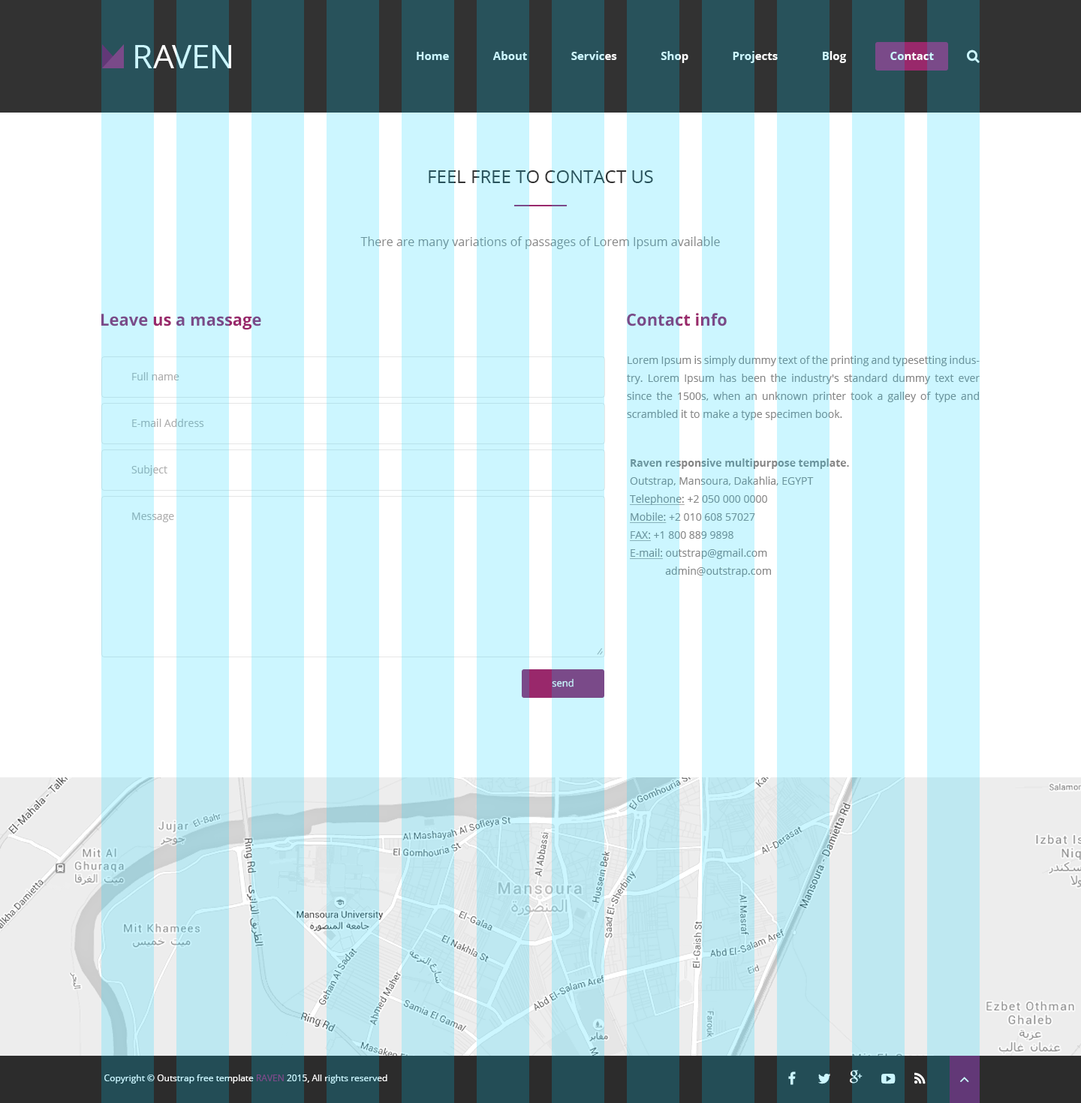
<style>
.page{position:relative;width:1081px;height:1103px;background:#ccf6ff}
.page>*{position:absolute;margin:0}
.t1{font:33px "OpenSans";color:#ccf6ff}
.t2{font:11.3px "OpenSans-Bold"}
.t3{font:18px "OpenSans";color:#28525b;text-transform:uppercase}
.t4{font:12px "OpenSans"}
.t5{font:16.5px "OpenSans-Bold"}
.t6{font:16.5px "OpenSans-Bold";color:#7a4a89}
.t7{font:10.5px/18px "OpenSans";color:#6b959e}
.t8{font:10.5px "OpenSans";color:#aeaeae}
.t9{font:10.5px "OpenSans"}
.t10{font:10.5px/18px "OpenSans-Bold";color:#6b959e}
.t11{font:10.5px/18px "OpenSans";color:#6b959e;text-decoration:underline}
.t12{font:9.8px "OpenSans";color:#ccf6ff}
.t13{font:9px "OpenSans"}
</style>
<div class="page">
<p class="t1" style="left:135px;top:45px;width:96px;height:23px">RAVEN</p>
<p class="t2" style="left:417px;top:51px;width:517px;height:12px">Home               About               Services               Shop               Projects               Blog               Contact</p>
<p class="t3" style="left:429px;top:170px;width:224px;height:13px">feel free to Contact us</p>
<p class="t4" style="left:360px;top:236px;width:360px;height:13px">There are many variations of passages of Lorem Ipsum available</p>
<p class="t5" style="left:101px;top:314px;width:160px;height:16px">Leave us a massage</p>
<p class="t6" style="left:627px;top:313px;width:100px;height:13px">Contact info</p>
<p class="t7" style="left:627px;top:356px;width:352px;height:64px;text-align:justify">Lorem Ipsum is simply dummy text of the printing and typesetting industry. Lorem Ipsum has been the industry's standard dummy text ever since the 1500s, when an unknown printer took a galley of type and scrambled it to make a type specimen book.</p>
<p class="t8" style="left:132px;top:372px;width:47px;height:9px">Full name</p>
<p class="t9" style="left:132px;top:419px;width:72px;height:8px">E-mail Address</p>
<p class="t7" style="left:630px;top:459px;width:219px;height:118px;text-align:justify"><span class="t10">Raven responsive multipurpose template.<br></span>Outstrap, Mansoura, Dakahlia, EGYPT<br><span class="t11">Telephone:</span> +2 050 000 0000<br><span class="t11">Mobile:</span> +2 010 608 57027<br><span class="t11">FAX:</span> +1 800 889 9898<br><span class="t11">E-mail:</span> outstrap@gmail.com<br>             admin@outstrap.com</p>
<p class="t9" style="left:131px;top:465px;width:36px;height:11px">Subject</p>
<p class="t9" style="left:132px;top:513px;width:42px;height:9px">Message</p>
<p class="t12" style="left:552px;top:678px;width:21px;height:9px">send</p>
<p class="t13" style="left:104px;top:1075px;width:283px;height:9px">Copyright © Outstrap free template RAVEN 2015, All rights reserved</p>
</div>
